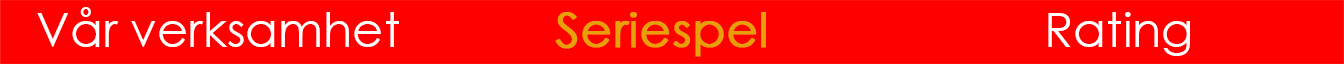
<style>
.page{position:relative;width:1344px;height:64px;background:#ff0000}
.page>*{position:absolute;margin:0}
.t1{font:48px "CenturyGothic";color:#ffffff}
.t2{font:48px "CenturyGothic";color:#e8a00a;font-weight:bold}
</style>
<div class="page">
<p class="t1" style="left:37px;top:7px;width:362px;height:40px">Vår verksamhet</p>
<p class="t2" style="left:555px;top:12px;width:211px;height:45px">Seriespel</p>
<p class="t1" style="left:1048px;top:12px;width:142px;height:44px">Rating</p>
</div>
